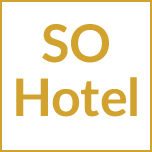
<style>
.page{position:relative;width:152px;height:152px;background:#ffffff}
.page>*{position:absolute;margin:0}
.t1{font:52px/54px "Lato-Bold";color:#d1a22d}
</style>
<div class="page">
<p class="t1" style="left:16px;top:24px;width:121px;height:93px;text-align:center">SO<br>Hotel</p>
</div>
